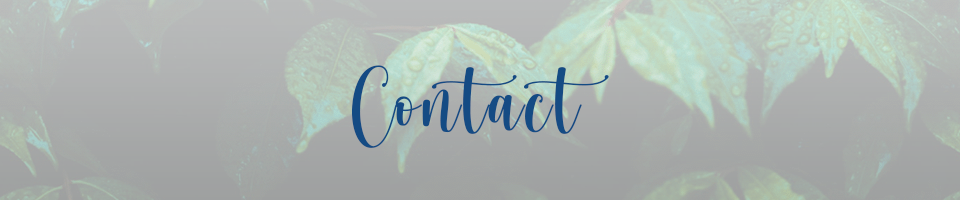
<style>
.page{position:relative;width:960px;height:200px}
.page>*{position:absolute;margin:0}
.t1{font:101.5px "hellohoneyPersonalUse";letter-spacing:0.025em;color:#144b84;scale:1.07 1}
</style>
<div class="page">
<p class="t1" style="left:352px;top:65px;width:257px;height:83px">Contact</p>
</div>
